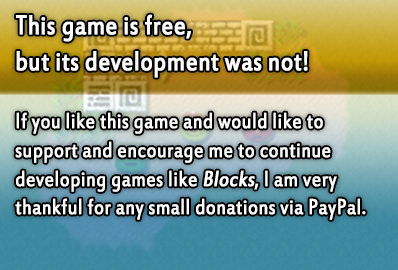
<style>
.page{position:relative;width:398px;height:270px}
.page>*{position:absolute;margin:0}
.t1{font:24px "EstrangeloEdessa";color:#ffffff;font-weight:bold;scale:0.8 1}
.t2{font:30px "EstrangeloEdessa";color:#ffffff;font-weight:bold;scale:0.8 1}
.t3{font:24px "EstrangeloEdessa";color:#ffffff;font-weight:bold;font-style:italic;scale:0.8 1}
</style>
<div class="page">
<p class="t1" style="left:15px;top:14px;width:351px;height:206px;text-align:justify"><span class="t2">This game is free,<br>but its development was not!<br></span><br>If you like this game and would like to support and encourage me to continue developing games like <span class="t3">Blocks</span>, I am very thankful for any small donations via PayPal.</p>
</div>
